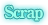
<style>
.page{position:relative;width:48px;height:25px}
.page>*{position:absolute;margin:0}
.t1{font:16px "RyuminPro-ExBold";letter-spacing:-0.08em;color:#9cffed}
</style>
<div class="page">
<p class="t1" style="left:4px;top:5px;width:39px;height:16px">Scrap</p>
</div>
